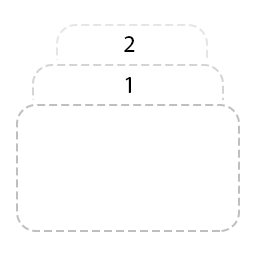
<style>
.page{position:relative;width:256px;height:256px;background:#ffffff}
.page>*{position:absolute;margin:0}
.t1{font:24px "MyriadPro-Regular";color:#000000}
</style>
<div class="page">
<p class="t1" style="left:124px;top:36px;width:11px;height:16px">2</p>
<p class="t1" style="left:125px;top:77px;width:6px;height:16px">1</p>
</div>
